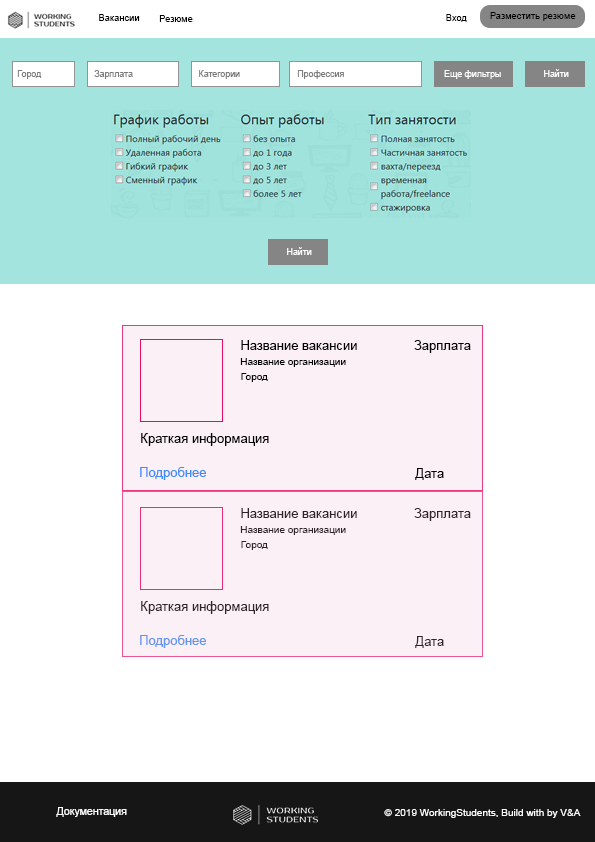
<style>
.page{position:relative;width:595px;height:842px;background:#ffffff}
.page>*{position:absolute;margin:0}
.t1{font:9.5px "ArialMT";color:#000000}
.t2{font:8.9px "ArialMT";color:#7c7c7c}
.t3{font:8.9px "ArialMT";color:#ffffff}
.t4{font:13px "ArialMT";color:#000000}
.t5{font:10px "ArialMT";color:#000000}
.t6{font:13px "ArialMT";color:#408af9}
.t7{font:13px "ArialMT";color:#2f242a}
.t8{font:10px "ArialMT";color:#2f242a}
.t9{font:13px "ArialMT";color:#6293f1}
.t10{font:10.5px "ArialMT";color:#fdfdfd}
.t11{font:9.5px "ArialMT";color:#fdfdfd;scale:1.06 1}
</style>
<div class="page">
<p class="t1" style="left:99px;top:14px;width:41px;height:7px">Вакансии</p>
<p class="t1" style="left:159px;top:15px;width:34px;height:7px">Резюме</p>
<p class="t1" style="left:446px;top:14px;width:21px;height:8px">Вход</p>
<p class="t1" style="left:490px;top:12px;width:86px;height:9px">Разместить резюме</p>
<p class="t2" style="left:17px;top:70px;width:25px;height:9px">Город</p>
<p class="t2" style="left:94px;top:70px;width:39px;height:9px">Зарплата</p>
<p class="t2" style="left:199px;top:70px;width:41px;height:9px">Категории</p>
<p class="t2" style="left:297px;top:70px;width:47px;height:9px">Профессия</p>
<p class="t3" style="left:444px;top:70px;width:57px;height:9px">Еще фильтры</p>
<p class="t3" style="left:544px;top:69px;width:25px;height:8px">Найти</p>
<p class="t3" style="left:287px;top:247px;width:25px;height:8px">Найти</p>
<p class="t4" style="left:241px;top:340px;width:116px;height:10px">Название вакансии</p>
<p class="t4" style="left:414px;top:340px;width:57px;height:13px">Зарплата</p>
<p class="t5" style="left:240px;top:358px;width:106px;height:9px">Название организации</p>
<p class="t5" style="left:241px;top:373px;width:27px;height:9px">Город</p>
<p class="t4" style="left:141px;top:433px;width:128px;height:13px">Краткая информация</p>
<p class="t6" style="left:140px;top:467px;width:67px;height:13px">Подробнее</p>
<p class="t4" style="left:415px;top:468px;width:29px;height:12px">Дата</p>
<p class="t7" style="left:241px;top:508px;width:116px;height:10px">Название вакансии</p>
<p class="t7" style="left:414px;top:508px;width:57px;height:13px">Зарплата</p>
<p class="t8" style="left:240px;top:526px;width:106px;height:9px">Название организации</p>
<p class="t8" style="left:241px;top:541px;width:27px;height:9px">Город</p>
<p class="t7" style="left:141px;top:601px;width:128px;height:13px">Краткая информация</p>
<p class="t9" style="left:140px;top:635px;width:67px;height:13px">Подробнее</p>
<p class="t7" style="left:415px;top:636px;width:29px;height:12px">Дата</p>
<p class="t10" style="left:56px;top:807px;width:71px;height:10px">Документация</p>
<p class="t11" style="left:384px;top:809px;width:197px;height:9px">© 2019 WorkingStudents, Build with by V&amp;A</p>
</div>
